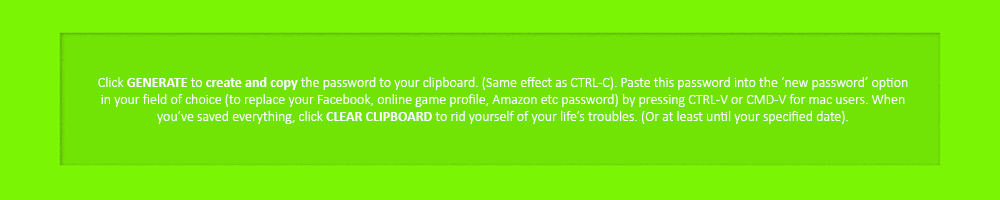
<style>
.page{position:relative;width:1000px;height:200px;background:#72e405}
.page>*{position:absolute;margin:0}
.t1{font:14px "Calibri-Light";color:#fefefe}
.t2{font:14px "Calibri-Bold";color:#fefefe}
</style>
<div class="page">
<p class="t1" style="left:98px;top:77px;width:810px;height:47px;text-align:center">Click <span class="t2">GENERATE</span> to <span class="t2">create and copy</span> the password to your clipboard. (Same effect as CTRL-C). Paste this password into the ‘new password’ option<br>in your field of choice (to replace your Facebook, online game profile, Amazon etc password) by pressing CTRL-V or CMD-V for mac users. When<br>you’ve saved everything, click <span class="t2">CLEAR CLIPBOARD</span> to rid yourself of your life’s troubles. (Or at least until your specified date).</p>
</div>
